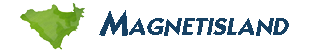
<style>
.page{position:relative;width:325px;height:55px;background:#ffffff}
.page>*{position:absolute;margin:0}
.t1{font:24px "Kaggish-Bold";letter-spacing:0.005em;color:#164164;text-transform:uppercase;font-style:italic}
.t2{font:36px "Kaggish-Bold";letter-spacing:0.005em;color:#164164;text-transform:uppercase;font-style:italic}
</style>
<div class="page">
<p class="t1" style="left:99px;top:10px;width:190px;height:26px"><span class="t2">M</span>agnetisland</p>
</div>
